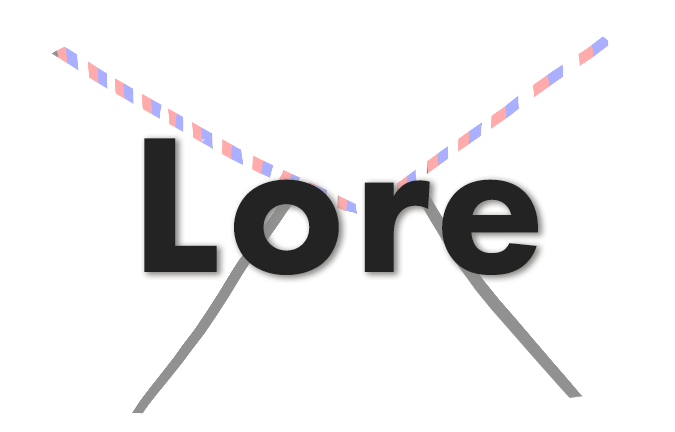
<style>
.page{position:relative;width:675px;height:432px;background:#ffffff}
.page>*{position:absolute;margin:0}
.t1{font:200px "FuturaPT-Heavy";letter-spacing:0.04em;color:#232323}
</style>
<div class="page">
<p class="t1" style="left:144px;top:138px;width:394px;height:137px">Lore</p>
</div>
